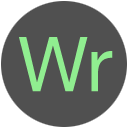
<style>
.page{position:relative;width:128px;height:128px;background:#505050}
.page>*{position:absolute;margin:0}
.t1{font:76px "HelveticaNeue";color:#90ee90}
</style>
<div class="page">
<p class="t1" style="left:19px;top:37px;width:94px;height:55px">Wr</p>
</div>
